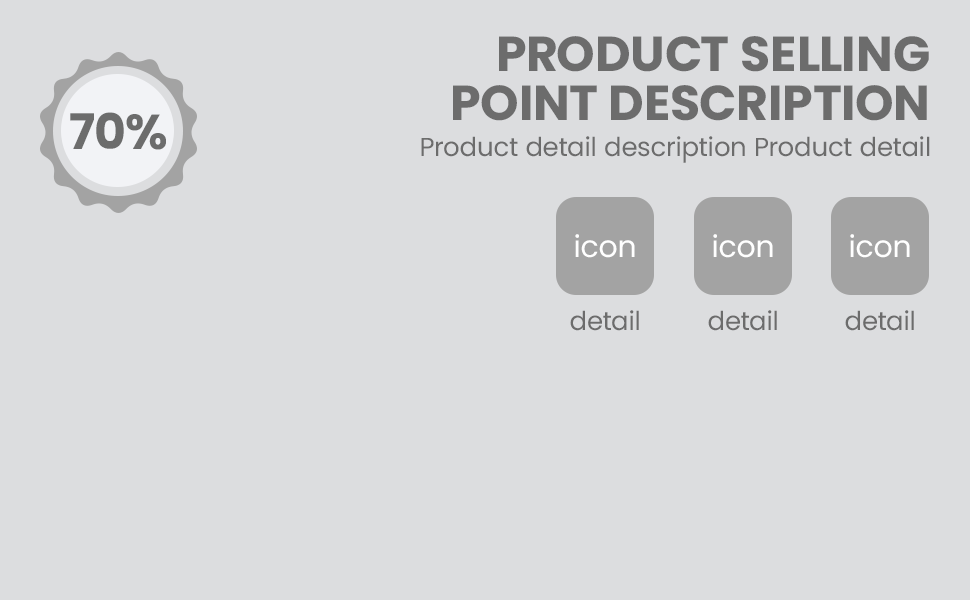
<style>
.page{position:relative;width:970px;height:600px;background:#dcdddf}
.page>*{position:absolute;margin:0}
.t1{font:49px/49px "Poppins-Bold";color:#6c6c6c;text-transform:uppercase}
.t2{font:49px "Poppins-Bold";color:#6c6c6c;text-transform:uppercase}
.t3{font:26px "Poppins-Regular";color:#6c6c6c}
.t4{font:30px "Poppins-Regular";color:#ffffff}
</style>
<div class="page">
<p class="t1" style="left:453px;top:36px;width:476px;height:85px;text-align:right">Product selling<br>point description</p>
<p class="t2" style="left:70px;top:112px;width:96px;height:38px">70%</p>
<p class="t3" style="left:421px;top:136px;width:509px;height:27px">Product detail description Product detail</p>
<p class="t4" style="left:575px;top:234px;width:60px;height:24px">icon</p>
<p class="t4" style="left:713px;top:234px;width:60px;height:24px">icon</p>
<p class="t4" style="left:850px;top:234px;width:60px;height:24px">icon</p>
<p class="t3" style="left:570px;top:310px;width:69px;height:21px">detail</p>
<p class="t3" style="left:708px;top:310px;width:69px;height:21px">detail</p>
<p class="t3" style="left:845px;top:310px;width:69px;height:21px">detail</p>
</div>
